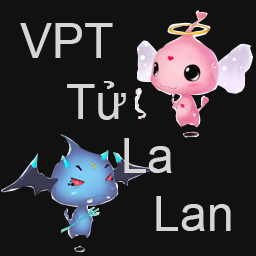
<style>
.page{position:relative;width:256px;height:256px;background:#111111}
.page>*{position:absolute;margin:0}
.t1{font:48px "ArialMT";color:#d6d6d6}
</style>
<div class="page">
<p class="t1" style="left:20px;top:23px;width:93px;height:35px">VPT</p>
<p class="t1" style="left:67px;top:81px;width:59px;height:39px">Tử</p>
<p class="t1" style="left:124px;top:138px;width:48px;height:35px">La</p>
<p class="t1" style="left:156px;top:196px;width:75px;height:35px">Lan</p>
</div>
